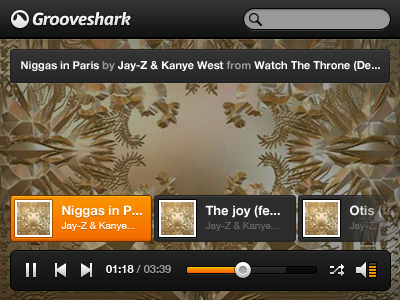
<style>
.page{position:relative;width:400px;height:300px}
.page>*{position:absolute;margin:0}
.t1{font:11px "HelveticaNeue-Bold";color:#ffffff}
.t2{font:11px "HelveticaNeue-Bold";color:#9c9c9c}
.t3{font:13px "HelveticaNeue-Bold";color:#ffffff}
.t4{font:10px "HelveticaNeue";color:#ffffff}
.t5{font:10px "HelveticaNeue";color:#666666}
.t6{font:11px "HelveticaNeue-Bold";color:#999999}
</style>
<div class="page">
<p class="t1" style="left:21px;top:61px;width:359px;height:10px">Niggas in Paris <span class="t2">by </span>Jay-Z &amp; Kanye West<span class="t2"> from </span>Watch The Throne (De...</p>
<p class="t3" style="left:62px;top:205px;width:80px;height:13px">Niggas in P...</p>
<p class="t3" style="left:205px;top:205px;width:75px;height:13px">The joy (fe...</p>
<p class="t4" style="left:61px;top:222px;width:74px;height:9px">Jay-Z &amp; Kanye...</p>
<p class="t5" style="left:205px;top:222px;width:74px;height:9px">Jay-Z &amp; Kanye...</p>
<p class="t6" style="left:106px;top:265px;width:65px;height:8px"><span class="t1">01:18 </span>/ 03:39</p>
</div>
